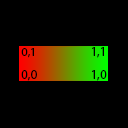
<style>
.page{position:relative;width:128px;height:128px;background:#000000}
.page>*{position:absolute;margin:0}
.t1{font:12.2px "MyriadPro-Regular";color:#000000}
.t2{font:12.5px "MyriadPro-Regular";color:#000000}
.t3{font:12.9px "MyriadPro-Regular";color:#000000}
.t4{font:13px "MyriadPro-Regular";color:#000000}
</style>
<div class="page">
<p class="t1" style="left:21px;top:48px;width:13px;height:10px">0,1</p>
<p class="t2" style="left:92px;top:47px;width:12px;height:11px">1,1</p>
<p class="t3" style="left:21px;top:70px;width:16px;height:11px">0,0</p>
<p class="t4" style="left:92px;top:70px;width:15px;height:11px">1,0</p>
</div>
